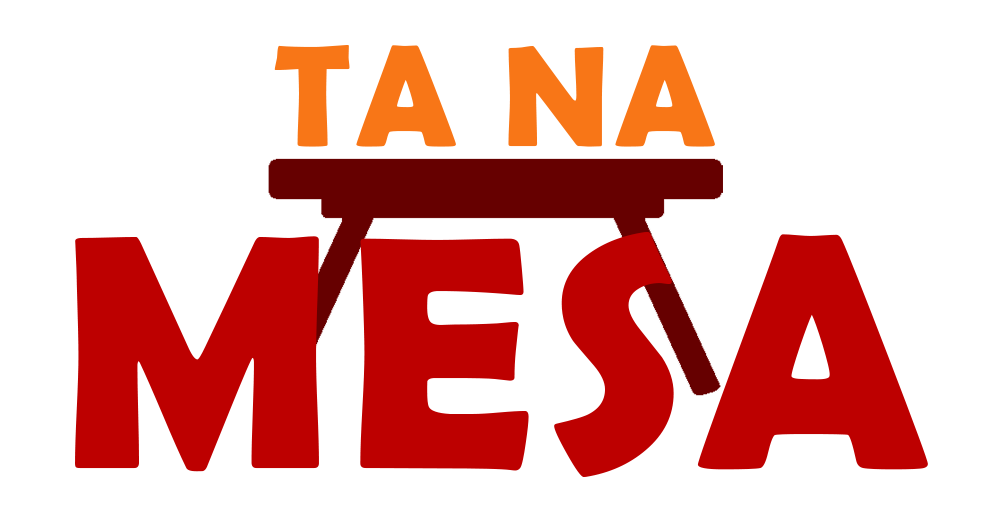
<style>
.page{position:relative;width:992px;height:532px;background:#ffffff}
.page>*{position:absolute;margin:0}
.t1{font:144.7px "BerlinSansFBDemi-Bold";letter-spacing:0.035em;color:#f87617}
.t2{font:334.8px "BerlinSansFBDemi-Bold";letter-spacing:0.035em;color:#bd0000}
</style>
<div class="page">
<p class="t1" style="left:274px;top:45px;width:441px;height:102px">TA NA</p>
<p class="t2" style="left:75px;top:232px;width:853px;height:245px">MESA</p>
</div>
